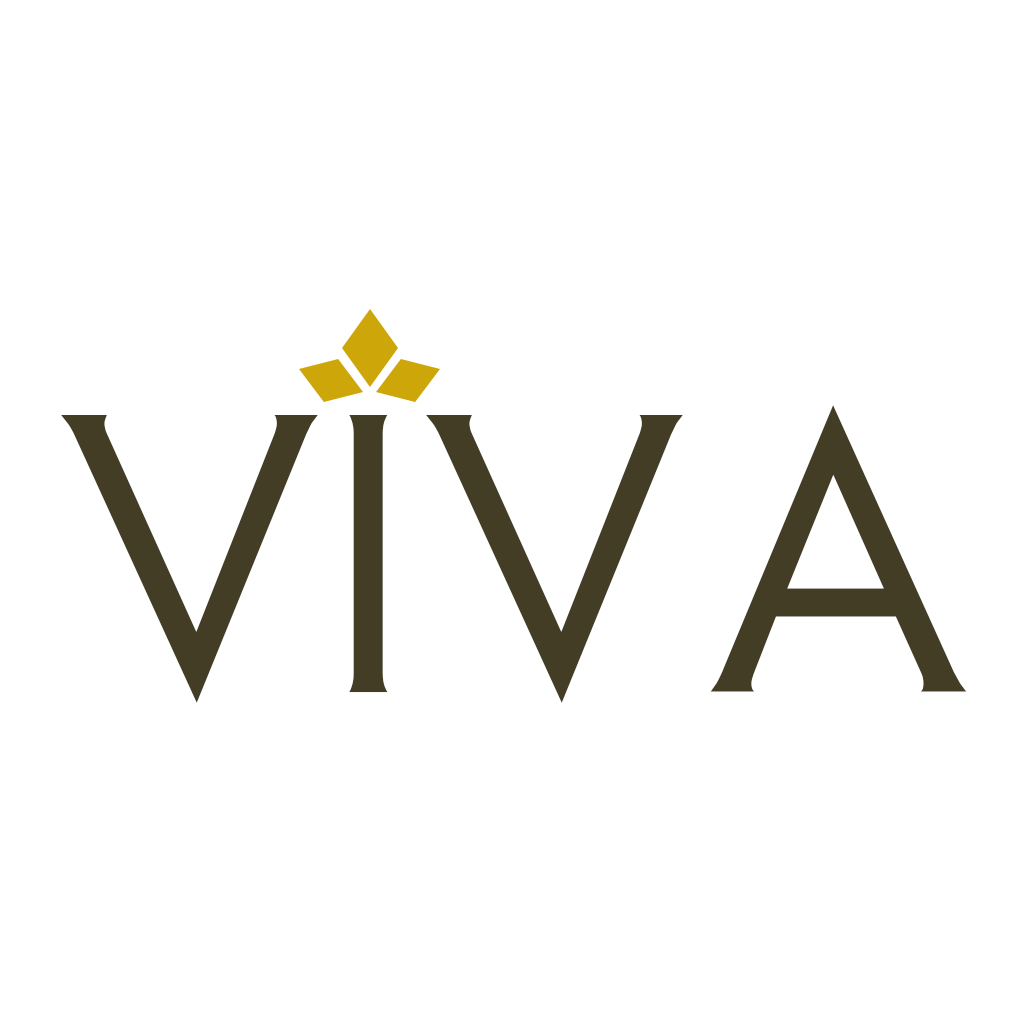
<style>
.page{position:relative;width:1024px;height:1024px;background:#ffffff}
.page>*{position:absolute;margin:0}
.t1{font:364.3px "SerifGothicRegular";color:#433d25;scale:0.96 1}
</style>
<div class="page">
<p class="t1" style="left:61px;top:405px;width:906px;height:298px">VIVA</p>
</div>
